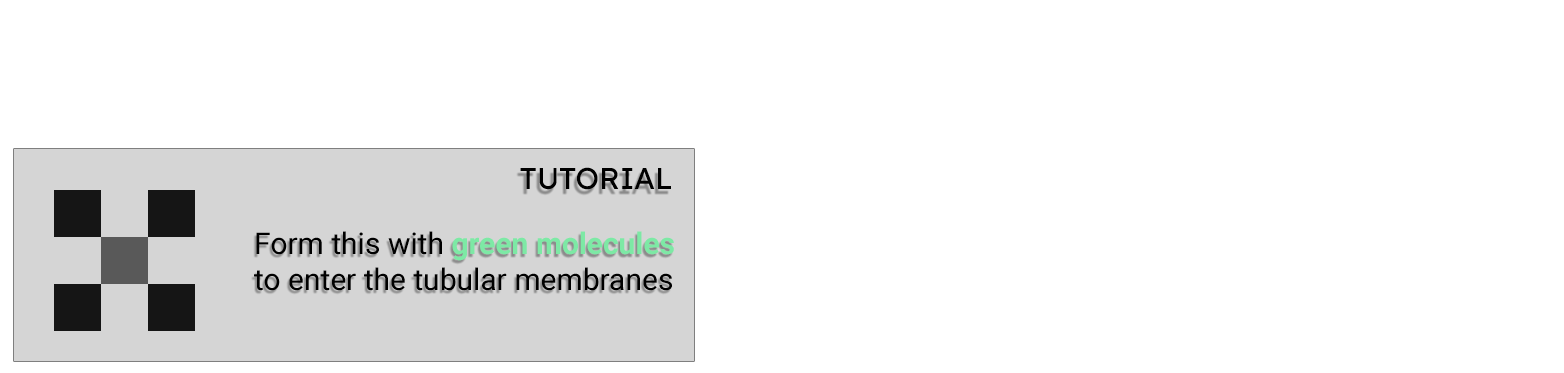
<style>
.page{position:relative;width:1564px;height:373px;background:#ffffff}
.page>*{position:absolute;margin:0}
.t1{font:30px "LexendDeca-Regular";color:#000000}
.t2{font:30px "Roboto-Regular";color:#000000}
.t3{font:30px "Roboto-Bold";color:#7de9a5}
</style>
<div class="page">
<p class="t1" style="left:520px;top:167px;width:151px;height:23px">TUTORIAL</p>
<p class="t2" style="left:254px;top:231px;width:420px;height:60px">Form this with <span class="t3">green molecules<br></span>to enter the tubular membranes</p>
</div>
